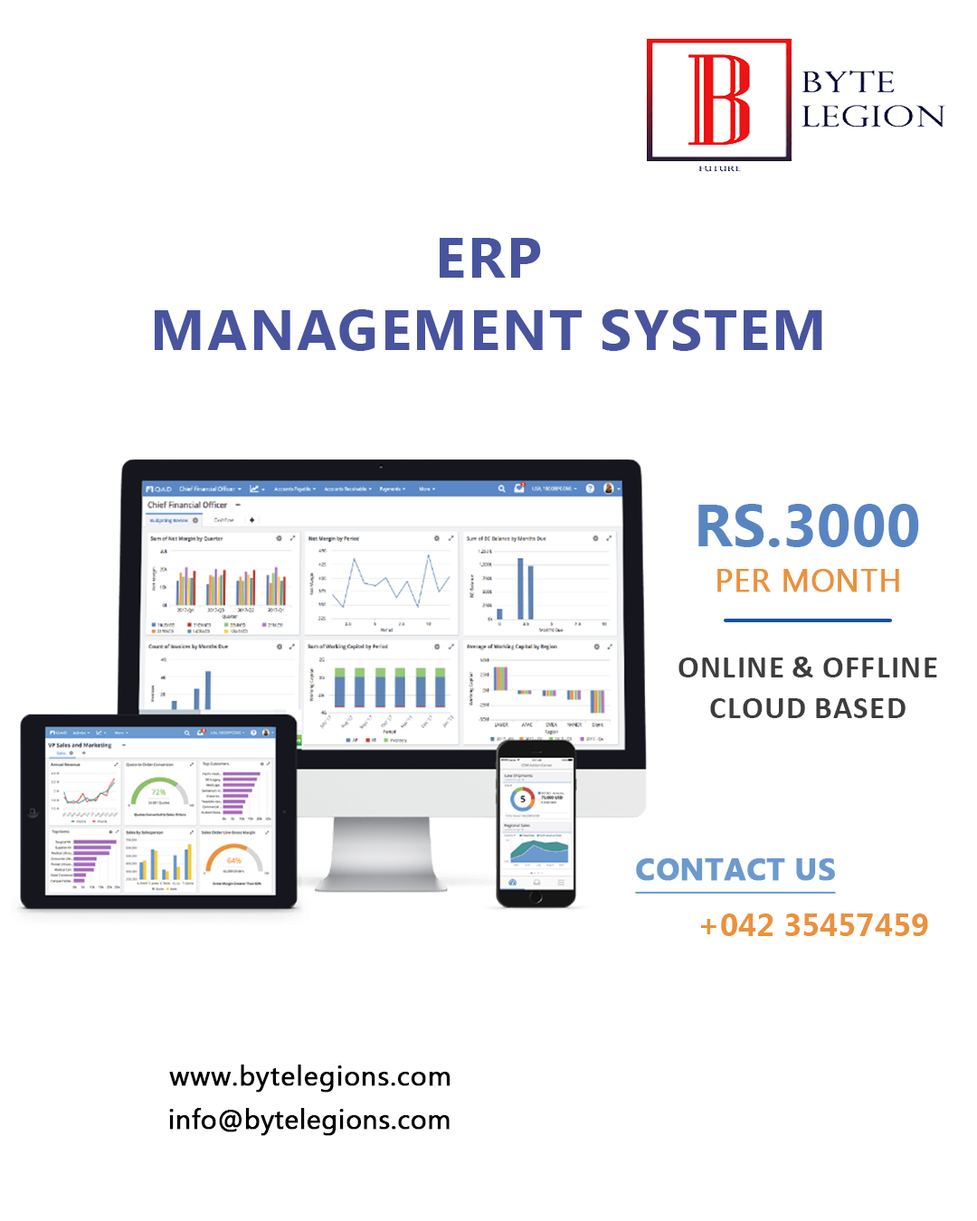
<style>
.page{position:relative;width:977px;height:1221px;background:#ffffff}
.page>*{position:absolute;margin:0}
.t1{font:57px/72.6px "SegoeUI-Bold";color:#48549e;text-transform:uppercase}
.t2{font:58.8px "MyanmarText-Bold";letter-spacing:0.01em;color:#5885c1;text-transform:uppercase}
.t3{font:31.7px "MyanmarText";letter-spacing:0.01em;color:#eb913a;text-transform:uppercase;font-weight:bold}
.t4{font:31.7px/40.7px "Calibri-Bold";color:#3d3d3d;text-transform:uppercase}
.t5{font:30.7px "MyanmarText-Bold";color:#6c9ace;text-transform:uppercase;font-weight:bold;text-decoration:underline}
.t6{font:31.7px "MyanmarText-Bold";color:#eb913c}
.t7{font:27.1px "MyanmarText";letter-spacing:0.015em;color:#000000;font-weight:bold}
.t8{font:27.1px "MyanmarText";color:#000000;font-weight:bold}
</style>
<div class="page">
<p class="t1" style="left:155px;top:238px;width:667px;height:113px;text-align:center">ERP<br>Management System</p>
<p class="t2" style="left:698px;top:504px;width:221px;height:43px">Rs.3000</p>
<p class="t3" style="left:717px;top:569px;width:182px;height:23px">per month</p>
<p class="t4" style="left:678px;top:657px;width:259px;height:61px;text-align:center">Online &amp; Offline<br>Cloud Based</p>
<p class="t5" style="left:635px;top:858px;width:201px;height:36px">contact us</p>
<p class="t6" style="left:701px;top:913px;width:227px;height:23px">+042 35457459</p>
<p class="t7" style="left:169px;top:1064px;width:281px;height:28px">www.bytelegions.com</p>
<p class="t8" style="left:169px;top:1108px;width:280px;height:28px">info@bytelegions.com</p>
</div>
